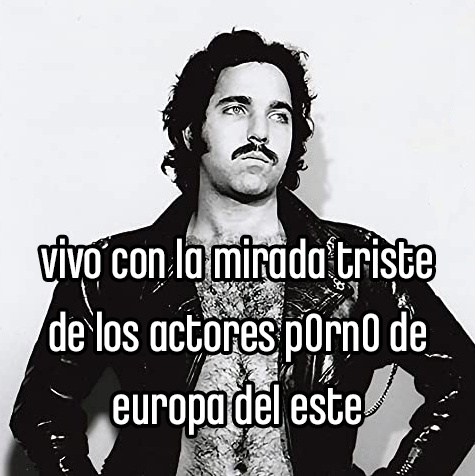
<style>
.page{position:relative;width:475px;height:476px}
.page>*{position:absolute;margin:0}
.t1{font:56.7px "ChaletComprime-CologneEighty";color:#ffffff}
</style>
<div class="page">
<p class="t1" style="left:41px;top:238px;width:391px;height:197px;text-align:center">vivo con la mirada triste<br>de los actores p0rn0 de<br>europa del este</p>
</div>
